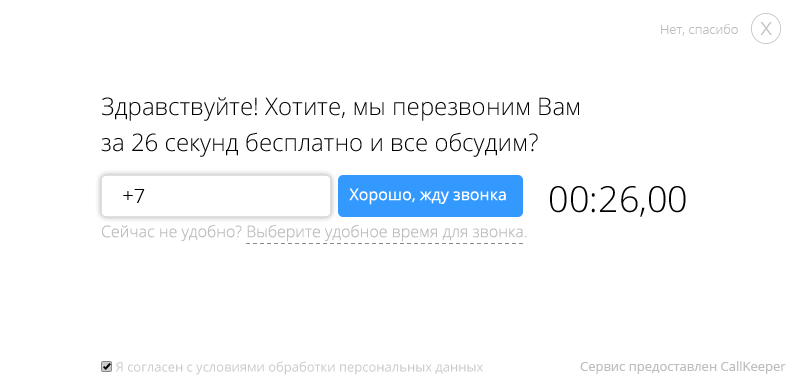
<style>
.page{position:relative;width:800px;height:390px;background:#ffffff}
.page>*{position:absolute;margin:0}
.t1{font:13px "OpenSans-Light";color:#bebebe}
.t2{font:25px "OpenSans-Light";color:#bebebe}
.t3{font:24px/36px "OpenSans-Light";color:#000000}
.t4{font:20px "OpenSans-Light";color:#000000}
.t5{font:16px "OpenSans";color:#ffffff}
.t6{font:36px "OpenSans-Light";color:#000000}
.t7{font:16px "OpenSans-Light";color:#bebebe}
.t8{font:13px "OpenSans";color:#cccccc}
.t9{font:13px/36px "OpenSans";color:#bebebe}
</style>
<div class="page">
<p class="t1" style="left:661px;top:24px;width:77px;height:12px">Нет, спасибо</p>
<p class="t2" style="left:760px;top:22px;width:12px;height:13px">x</p>
<p class="t3" style="left:101px;top:97px;width:478px;height:60px">Здравствуйте! Хотите, мы перезвоним Вам<br>за 26 секунд бесплатно и все обсудим?</p>
<p class="t4" style="left:123px;top:189px;width:22px;height:14px">+7</p>
<p class="t5" style="left:349px;top:188px;width:157px;height:17px">Хорошо, жду звонка</p>
<p class="t6" style="left:550px;top:186px;width:136px;height:31px">00:26,00</p>
<p class="t7" style="left:102px;top:224px;width:425px;height:18px">Сейчас не удобно? Выберите удобное время для звонка.</p>
<p class="t8" style="left:116px;top:361px;width:367px;height:14px">Я согласен с условиями обработки персональных данных</p>
<p class="t9" style="left:580px;top:361px;width:206px;height:13px">Сервис предоставлен CallKeeper<br><br><br>er</p>
</div>
